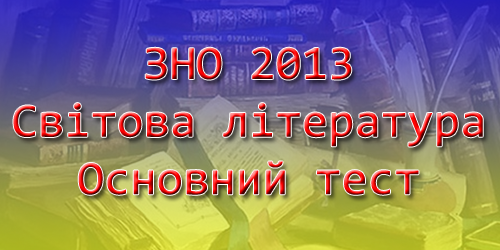
<style>
.page{position:relative;width:500px;height:250px}
.page>*{position:absolute;margin:0}
.t1{font:48px "Consolas"}
</style>
<div class="page">
<p class="t1" style="left:13px;top:47px;width:470px;height:148px;text-align:center">ЗНО 2013<br>Світова література<br>Основний тест</p>
</div>
